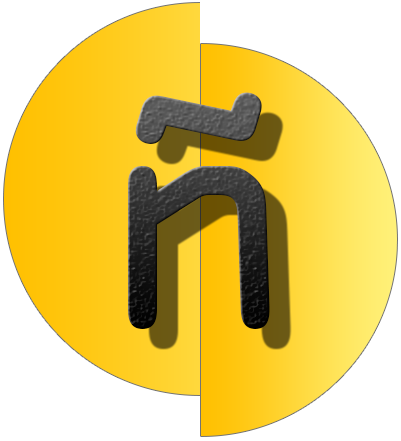
<style>
.page{position:relative;width:401px;height:441px;background:#ffffff}
.page>*{position:absolute;margin:0}
.t1{font:301.8px "OCRAStd"}
</style>
<div class="page">
<p class="t1" style="left:128px;top:92px;width:142px;height:237px">ñ</p>
</div>
